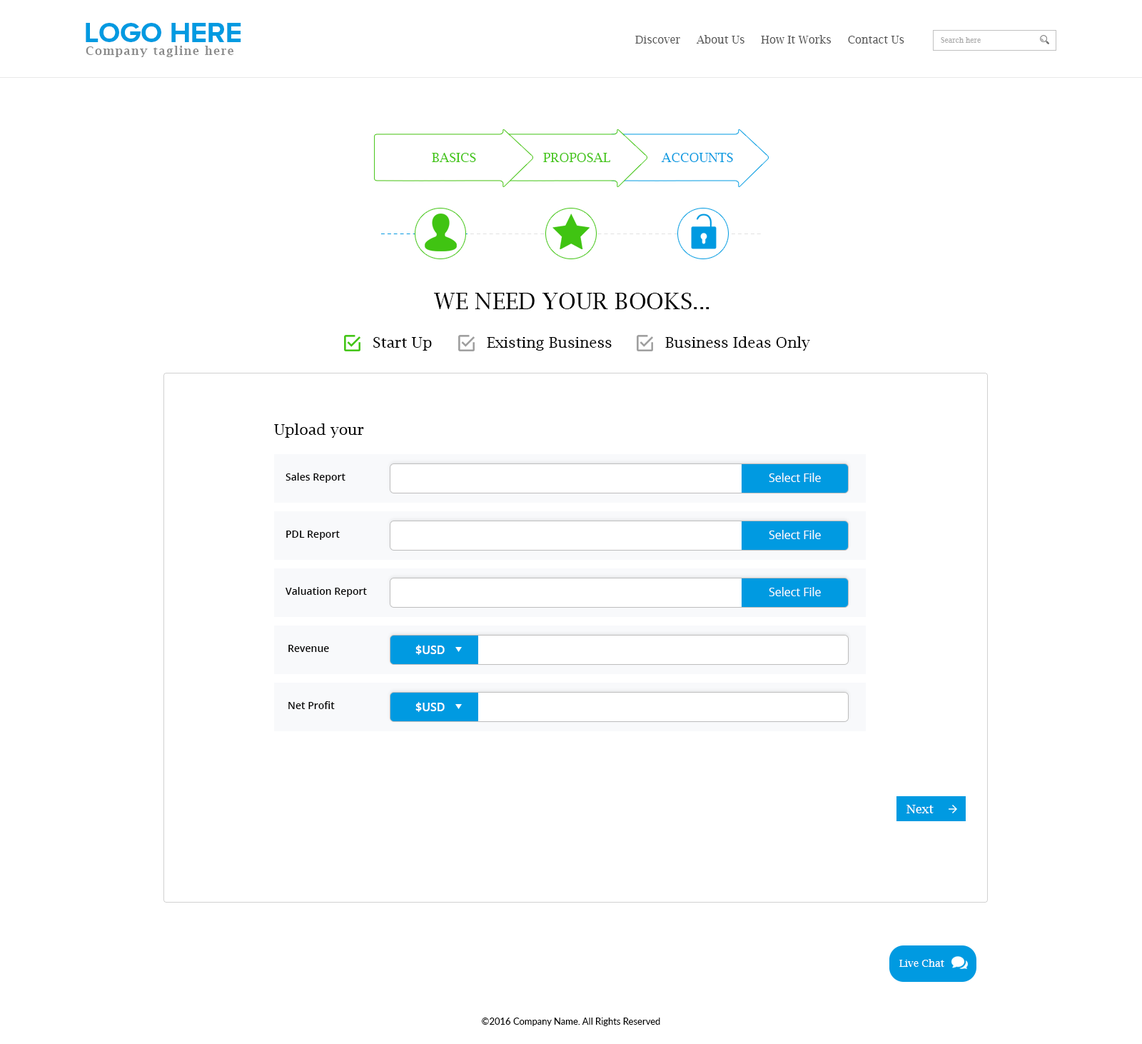
<style>
.page{position:relative;width:1142px;height:1044px;background:#ffffff}
.page>*{position:absolute;margin:0}
.t1{font:28.6px "ProximaNovaA-Bold";color:#009ae1;text-transform:uppercase}
.t2{font:10.7px "LucidaBright";color:#585858}
.t3{font:7.1px "LucidaBright";color:#afafaf}
.t4{font:11.4px "LucidaBright-Demi";letter-spacing:0.1em;color:#898989}
.t5{font:12.9px "LucidaBright";color:#40c412}
.t6{font:12.9px "LucidaBright";color:#009ae1;text-transform:uppercase}
.t7{font:15px "LucidaBright";letter-spacing:0.1em;color:#e1e1e1}
.t8{font:15px "LucidaBright";letter-spacing:0.1em;color:#009ae1}
.t9{font:22.8px "LucidaBright";color:#000000;text-transform:uppercase}
.t10{font:15px "LucidaBright";color:#000000}
.t11{font:10px "OpenSans-Semibold";color:#000000}
.t12{font:11.4px "OpenSans";color:#ffffff}
.t13{font:11.4px "OpenSans-Semibold";color:#ffffff}
.t14{font:12.1px "LucidaBright";color:#ffffff}
.t15{font:10px "LucidaBright";color:#ffffff}
.t16{font:9.3px "Lato-Regular";color:#000000}
</style>
<div class="page">
<p class="t1" style="left:86px;top:23px;width:155px;height:19px">Logo HERE</p>
<p class="t2" style="left:635px;top:35px;width:270px;height:9px">Discover     About Us     How It Works     Contact Us</p>
<p class="t3" style="left:941px;top:37px;width:40px;height:6px">Search here</p>
<p class="t4" style="left:86px;top:46px;width:147px;height:11px">Company tagline here</p>
<p class="t5" style="left:432px;top:153px;width:44px;height:9px">BASICS</p>
<p class="t5" style="left:543px;top:153px;width:67px;height:9px">PROPOSAL</p>
<p class="t6" style="left:661px;top:153px;width:72px;height:9px">Accounts</p>
<p class="t7" style="left:381px;top:233px;width:380px;height:1px"><span class="t8">--------------</span>----------------------------------------------</p>
<p class="t9" style="left:434px;top:293px;width:276px;height:16px">we need your books...</p>
<p class="t10" style="left:373px;top:337px;width:59px;height:14px">Start Up</p>
<p class="t10" style="left:487px;top:337px;width:125px;height:14px">Existing Business</p>
<p class="t10" style="left:665px;top:336px;width:145px;height:15px">Business Ideas Only</p>
<p class="t10" style="left:274px;top:423px;width:90px;height:15px">Upload your</p>
<p class="t11" style="left:286px;top:473px;width:60px;height:10px">Sales Report</p>
<p class="t12" style="left:769px;top:473px;width:52px;height:9px">Select File</p>
<p class="t11" style="left:286px;top:530px;width:54px;height:10px">PDL Report</p>
<p class="t12" style="left:769px;top:530px;width:52px;height:9px">Select File</p>
<p class="t11" style="left:286px;top:587px;width:81px;height:10px">Valuation Report</p>
<p class="t12" style="left:769px;top:587px;width:52px;height:9px">Select File</p>
<p class="t11" style="left:288px;top:645px;width:41px;height:7px">Revenue</p>
<p class="t13" style="left:416px;top:645px;width:29px;height:10px">$USD</p>
<p class="t11" style="left:288px;top:701px;width:47px;height:8px">Net Profit</p>
<p class="t13" style="left:416px;top:702px;width:29px;height:10px">$USD</p>
<p class="t14" style="left:907px;top:805px;width:27px;height:8px">Next</p>
<p class="t15" style="left:900px;top:959px;width:45px;height:8px">Live Chat</p>
<p class="t16" style="left:482px;top:1017px;width:178px;height:9px">©2016 Company Name. All Rights Reserved</p>
</div>
